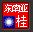
<style>
.page{position:relative;width:33px;height:32px;background:#f20000}
.page>*{position:absolute;margin:0}
.t1{font:10.4px "SimSun";letter-spacing:-0.25em;color:#ffffff}
.t2{font:11.7px "SimSun";color:#ffffff}
</style>
<div class="page">
<p class="t1" style="left:4px;top:4px;width:24px;height:9px">东南亚</p>
<p class="t2" style="left:16px;top:15px;width:11px;height:12px">桂</p>
</div>
